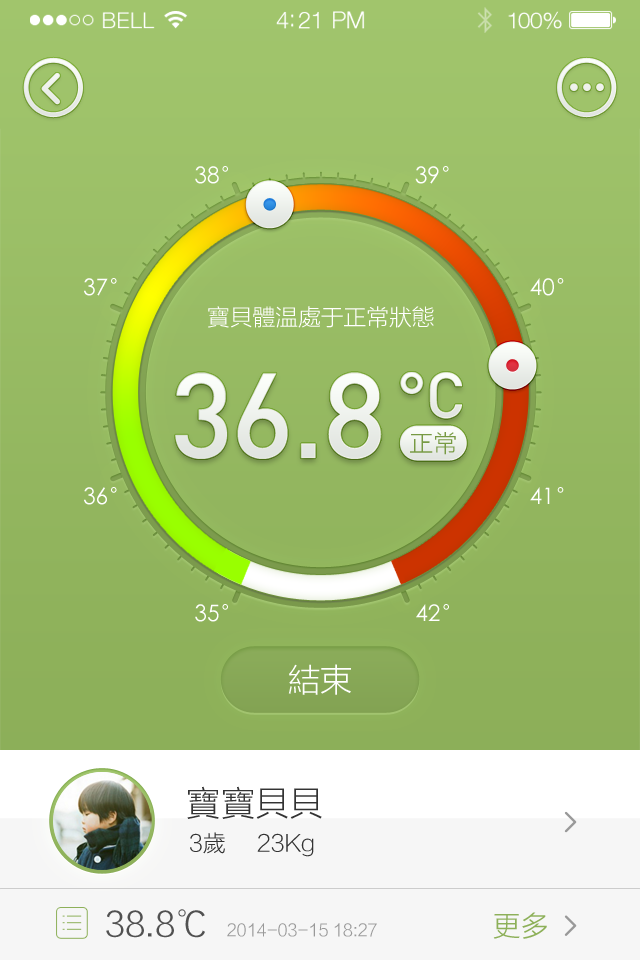
<style>
.page{position:relative;width:640px;height:960px}
.page>*{position:absolute;margin:0}
.t1{font:22.8px "STXihei";color:#ffffff}
.t2{font:22.8px "FZLTXHFW--GB1-0";color:#ffffff}
.t3{font:118.5px "DIN-Medium";letter-spacing:-0.02em;color:#ffffff}
.t4{font:63.8px "DIN-Medium";letter-spacing:-0.02em;color:#ffffff}
.t5{font:24.5px "FZLTXHK";letter-spacing:-0.02em;color:#779a43}
.t6{font:32px "FZLTXHFW--GB1-0";color:#ffffff}
.t7{font:34.1px "FZLTXHFW--GB1-0";color:#333333}
.t8{font:22.8px "FZLTXHFW--GB1-0";color:#333333}
.t9{font:34.1px "FZLTXHK";letter-spacing:-0.02em;color:#515151}
.t10{font:28.4px "FZLTXHK";letter-spacing:-0.02em;color:#8db059}
.t11{font:17.1px "FZLTXHK";letter-spacing:-0.02em;color:#999999}
</style>
<div class="page">
<p class="t1" style="left:195px;top:166px;width:33px;height:18px">38°</p>
<p class="t1" style="left:415px;top:166px;width:34px;height:18px">39°</p>
<p class="t1" style="left:84px;top:278px;width:33px;height:18px">37°</p>
<p class="t1" style="left:530px;top:278px;width:34px;height:18px">40°</p>
<p class="t2" style="left:208px;top:306px;width:226px;height:22px">宝贝体温处于正常状态</p>
<p class="t3" style="left:175px;top:372px;width:207px;height:87px">36.8</p>
<p class="t4" style="left:400px;top:372px;width:62px;height:47px">°C</p>
<p class="t5" style="left:410px;top:432px;width:46px;height:23px">正常</p>
<p class="t1" style="left:84px;top:487px;width:33px;height:18px">36°</p>
<p class="t1" style="left:530px;top:487px;width:34px;height:17px">41°</p>
<p class="t1" style="left:195px;top:604px;width:33px;height:18px">35°</p>
<p class="t1" style="left:416px;top:604px;width:33px;height:17px">42°</p>
<p class="t6" style="left:288px;top:664px;width:63px;height:31px">结束</p>
<p class="t7" style="left:187px;top:786px;width:135px;height:33px">宝宝贝贝</p>
<p class="t8" style="left:190px;top:832px;width:124px;height:25px">3岁     23Kg</p>
<p class="t9" style="left:106px;top:909px;width:99px;height:29px">38.8℃</p>
<p class="t10" style="left:493px;top:912px;width:54px;height:27px">更多</p>
<p class="t11" style="left:227px;top:923px;width:150px;height:14px">2014-03-15 18:27</p>
</div>
